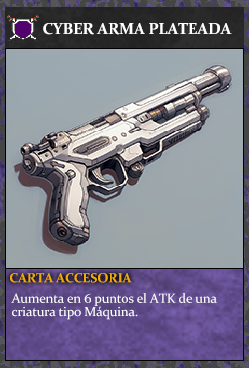
<style>
.page{position:relative;width:249px;height:368px}
.page>*{position:absolute;margin:0}
.t1{font:16px "Constantia-Bold";letter-spacing:-0.02em;color:#ffffff}
.t2{font:13.3px "Constantia-Bold";letter-spacing:-0.02em;color:#f2ac05}
.t3{font:13.3px/13.3px "Constantia";letter-spacing:-0.02em;color:#ffffff}
</style>
<div class="page">
<p class="t1" style="left:43px;top:23px;width:189px;height:12px">CYBER ARMA PLATEADA</p>
<p class="t2" style="left:10px;top:273px;width:122px;height:10px">CARTA ACCESORIA</p>
<p class="t3" style="left:11px;top:293px;width:206px;height:27px">Aumenta en 6 puntos el ATK de una<br>criatura tipo Máquina.</p>
</div>
